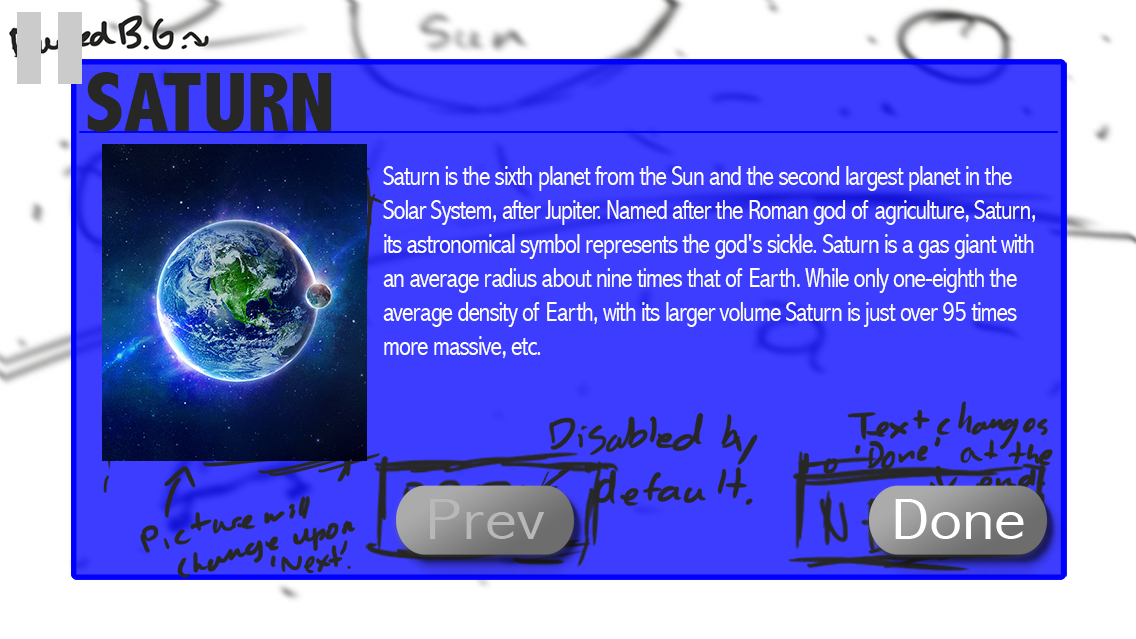
<style>
.page{position:relative;width:1136px;height:639px;background:#3d3dff}
.page>*{position:absolute;margin:0}
.t1{font:84.6px "AbadiMT-CondensedExtraBold";color:#272825}
.t2{font:28.4px "AbadiMT-CondensedLight";letter-spacing:-0.04em;color:#ffffff}
</style>
<div class="page">
<p class="t1" style="left:87px;top:72px;width:245px;height:60px">SATURN</p>
<p class="t2" style="left:383px;top:166px;width:652px;height:192px">Saturn is the sixth planet from the Sun and the second largest planet in the<br>Solar System, after Jupiter. Named after the Roman god of agriculture, Saturn,<br>its astronomical symbol represents the god's sickle. Saturn is a gas giant with <br>an average radius about nine times that of Earth. While only one-eighth the<br>average density of Earth, with its larger volume Saturn is just over 95 times <br>more massive, etc.</p>
</div>
